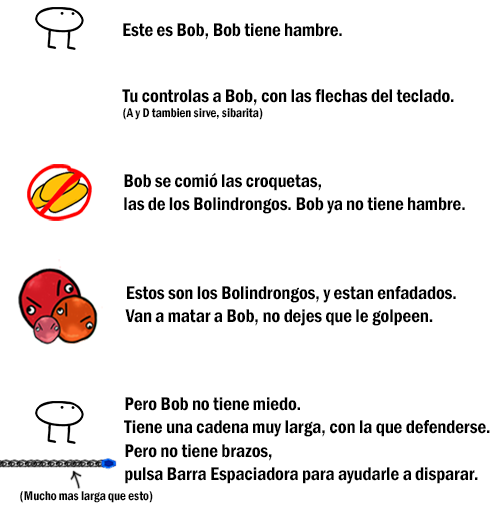
<style>
.page{position:relative;width:500px;height:515px;background:#ffffff}
.page>*{position:absolute;margin:0}
.t1{font:19.3px "FranklinGothic-DemiCond";color:#000000}
.t2{font:22.2px "FranklinGothic-DemiCond";color:#000000}
</style>
<div class="page">
<p class="t1" style="left:123px;top:23px;width:219px;height:17px">Este es Bob, Bob tiene hambre.</p>
<p class="t1" style="left:122px;top:89px;width:332px;height:17px">Tu controlas a Bob, con las flechas del teclado.</p>
<p class="t2" style="left:123px;top:108px;width:140px;height:12px">(A y D tambien sirve, sibarita)</p>
<p class="t1" style="left:124px;top:172px;width:341px;height:42px">Bob se comió las croquetas,<br>las de los Bolindrongos. Bob ya no tiene hambre.</p>
<p class="t1" style="left:125px;top:286px;width:331px;height:40px">Estos son los Bolindrongos, y estan enfadados.<br>Van a matar a Bob, no dejes que le golpeen.</p>
<p class="t1" style="left:124px;top:397px;width:366px;height:87px">Pero Bob no tiene miedo.<br>Tiene una cadena muy larga, con la que defenderse.<br>Pero no tiene brazos, <br>pulsa Barra Espaciadora para ayudarle a disparar.</p>
<p class="t2" style="left:20px;top:491px;width:133px;height:12px">(Mucho mas larga que esto)</p>
</div>
